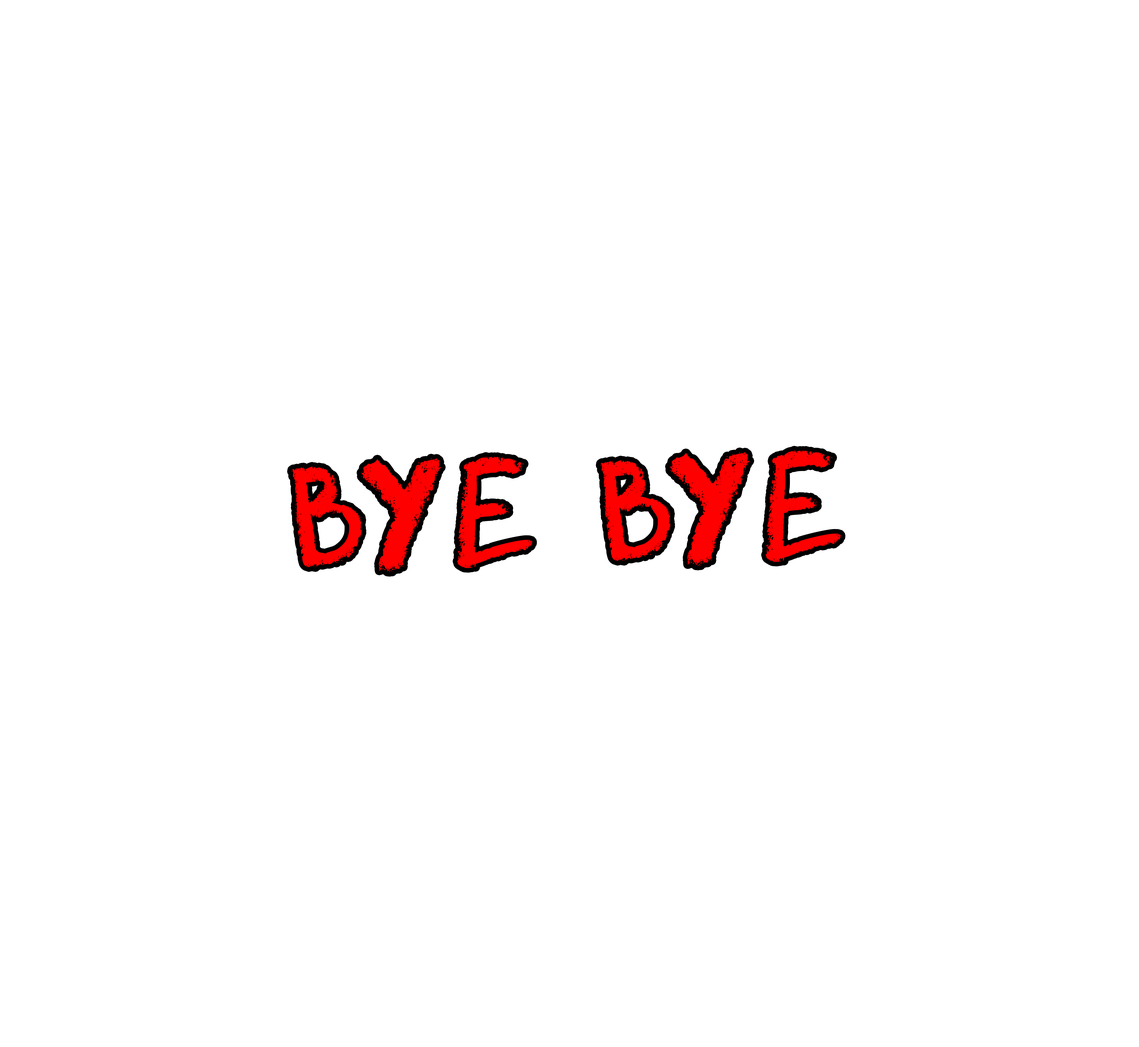
<style>
.page{position:relative;width:1139px;height:1047px;background:#ffffff}
.page>*{position:absolute;margin:0}
.t1{font:141.5px "DKCoolCrayon";letter-spacing:0.04em;color:#ff0000}
</style>
<div class="page">
<p class="t1" style="left:291px;top:450px;width:550px;height:122px;rotate:-1deg">BYE BYE</p>
</div>
